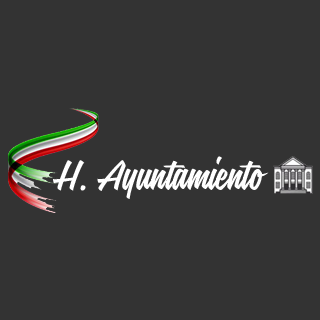
<style>
.page{position:relative;width:320px;height:320px;background:#333333}
.page>*{position:absolute;margin:0}
.t1{font:52.4px "SignalistW00-Signalist";color:#ffffff}
</style>
<div class="page">
<p class="t1" style="left:53px;top:156px;width:216px;height:43px">H. Ayuntamiento</p>
</div>
